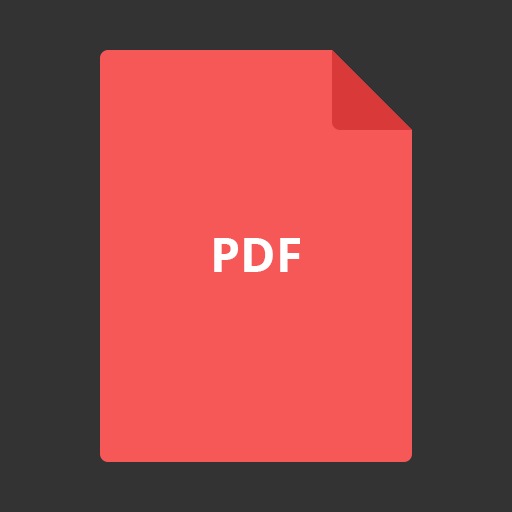
<style>
.page{position:relative;width:512px;height:512px;background:#333333}
.page>*{position:absolute;margin:0}
.t1{font:48px "OpenSans-Bold";color:#ffffff}
</style>
<div class="page">
<p class="t1" style="left:214px;top:238px;width:86px;height:34px">PDF</p>
</div>
